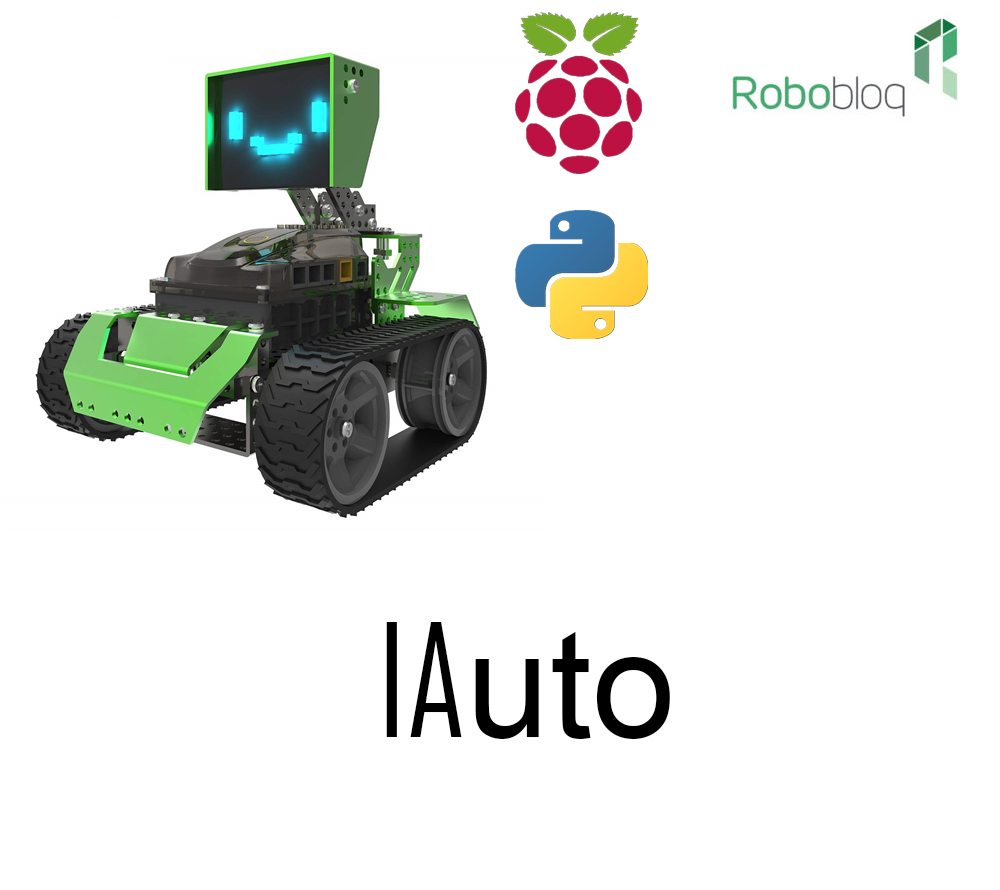
<style>
.page{position:relative;width:1000px;height:890px;background:#ffffff}
.page>*{position:absolute;margin:0}
.t1{font:150px "ArialMT";color:#000000}
.t2{font:150px "AgencyFB-Reg";color:#000000}
</style>
<div class="page">
<p class="t1" style="left:386px;top:622px;width:284px;height:117px"><span class="t2">IA</span>uto</p>
</div>
